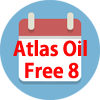
<style>
.page{position:relative;width:100px;height:100px;background:#ffffff}
.page>*{position:absolute;margin:0}
.t1{font:19.6px "AdobeGothicStd-Bold";color:#fc0606}
</style>
<div class="page">
<p class="t1" style="left:13px;top:40px;width:74px;height:17px">Atlas Oil</p>
<p class="t1" style="left:25px;top:62px;width:54px;height:17px">Free 8</p>
</div>
